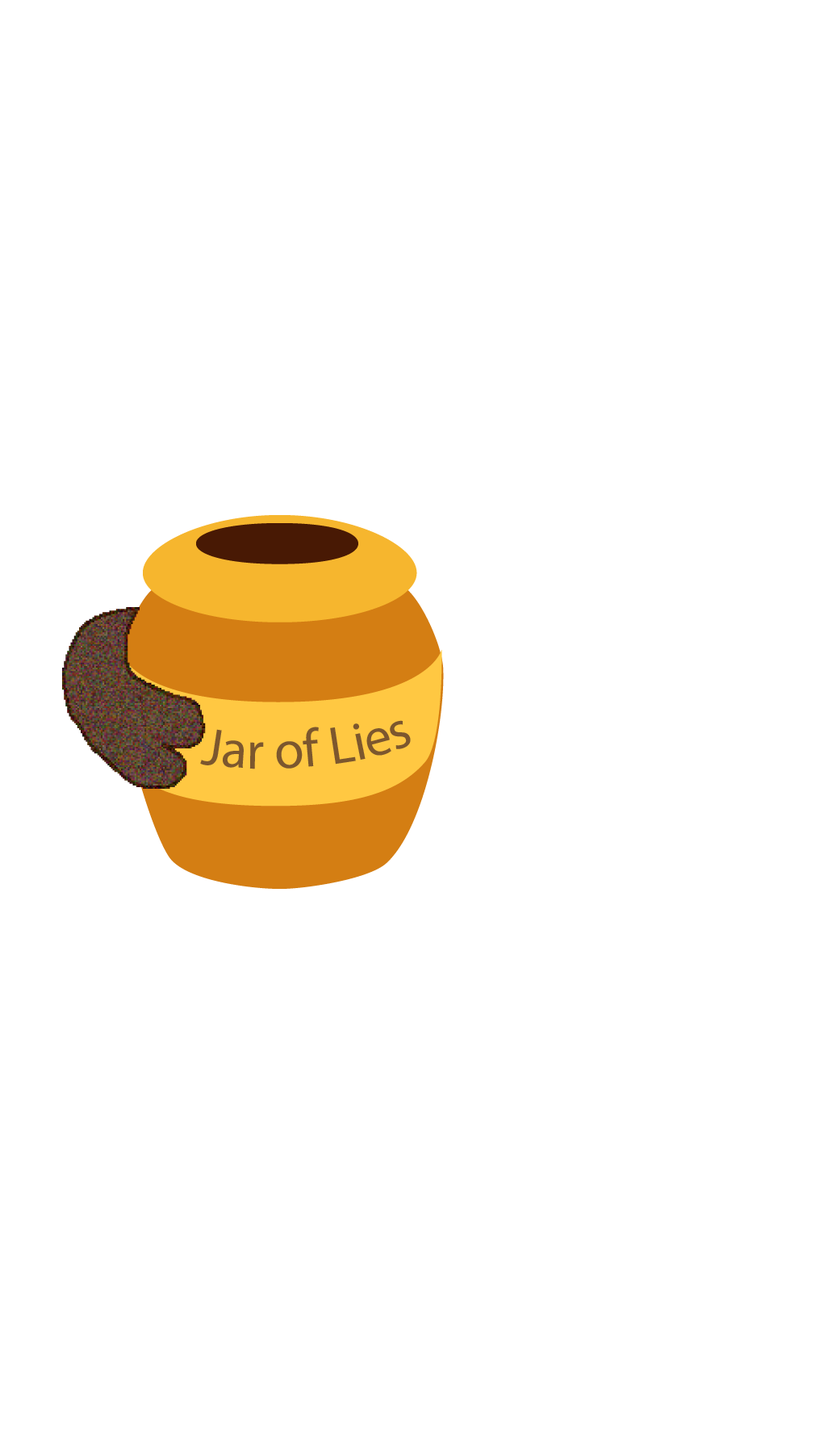
<style>
.page{position:relative;width:832px;height:1433px;background:#ffffff}
.page>*{position:absolute;margin:0}
.t1{font:53.8px "MyriadPro-Regular";color:#7c572e}
</style>
<div class="page">
<p class="t1" style="left:200px;top:720px;width:211px;height:49px">Jar of Lies</p>
</div>
